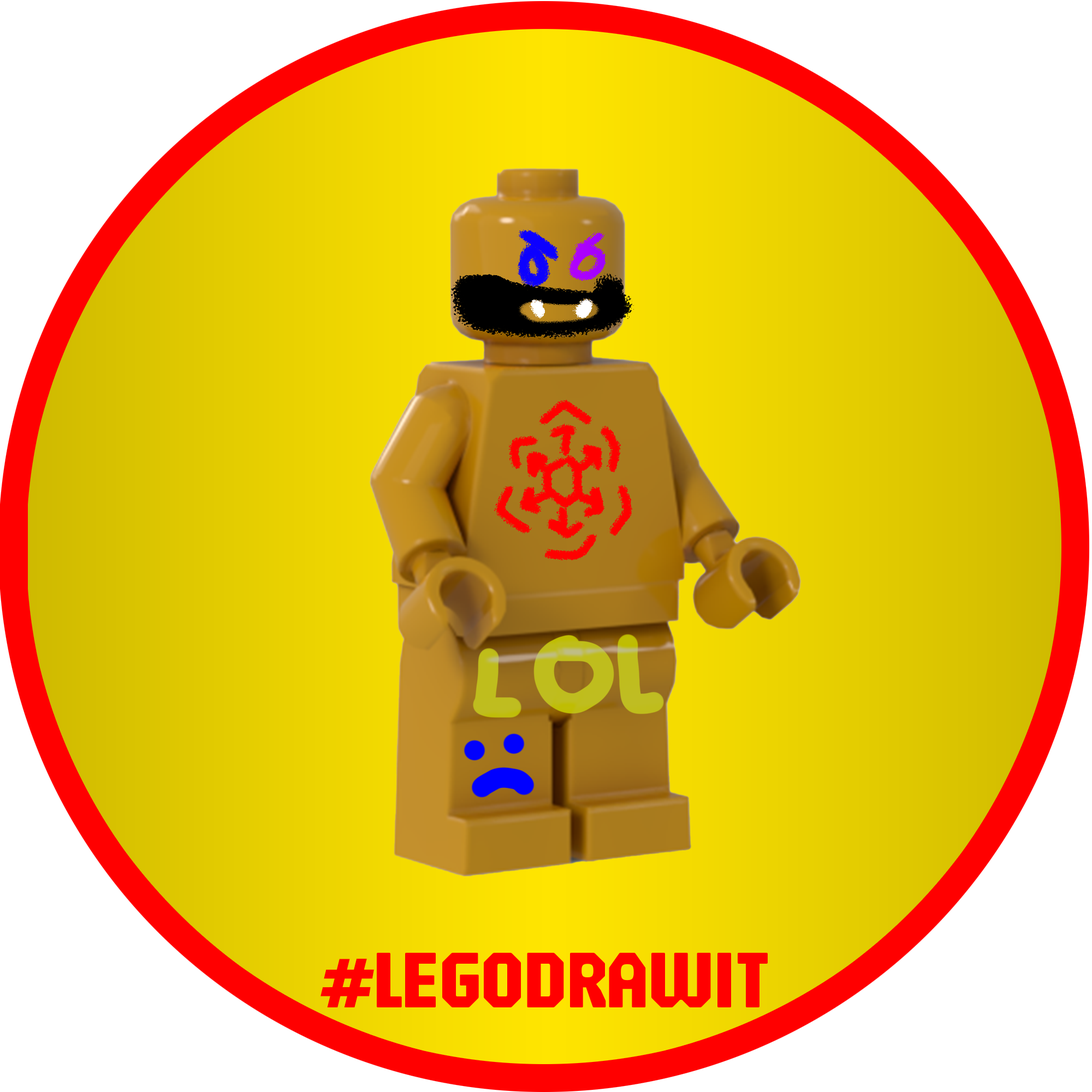
<style>
.page{position:relative;width:1092px;height:1092px;background:#ffffff}
.page>*{position:absolute;margin:0}
.t1{font:81.9px "JaroRegular-Regular";letter-spacing:-0.04em;color:#ff0000}
</style>
<div class="page">
<p class="t1" style="left:320px;top:953px;width:448px;height:54px">#LEGODRAWIT</p>
</div>
